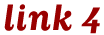
<style>
.page{position:relative;width:104px;height:35px;background:#ffffff}
.page>*{position:absolute;margin:0}
.t1{font:36px "MatrixScriptBold";letter-spacing:0.025em;color:#990000}
</style>
<div class="page">
<p class="t1" style="left:4px;top:4px;width:96px;height:30px">link 4</p>
</div>
